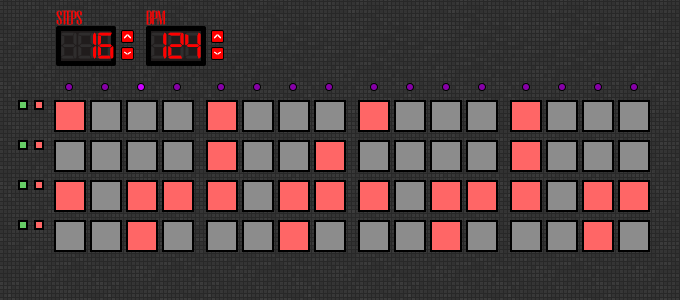
<style>
.page{position:relative;width:680px;height:300px;background:#282828}
.page>*{position:absolute;margin:0}
.t1{font:17px "Tommaso";letter-spacing:-0.04em;color:#ff0000}
.t2{font:39.3px "Digital-7";letter-spacing:-0.04em;color:#2f2d2d}
.t3{font:39.3px "Digital-7";letter-spacing:-0.04em;color:#ff0000}
.t4{font:18px "Digital-7";letter-spacing:-0.04em;color:#ffffff}
.t5{font:39.3px "Digital-7";letter-spacing:-0.04em}
.t6{font:13.2px "Digital-7";letter-spacing:-0.04em;color:#ffffff;scale:1.37 1}
</style>
<div class="page">
<p class="t1" style="left:56px;top:10px;width:26px;height:15px">STEPS</p>
<p class="t1" style="left:146px;top:10px;width:19px;height:15px">BPM</p>
<p class="t2" style="left:61px;top:32px;width:50px;height:27px">888</p>
<p class="t3" style="left:93px;top:32px;width:21px;height:27px">16</p>
<p class="t4" style="left:124px;top:34px;width:7px;height:5px">^</p>
<p class="t5" style="left:151px;top:32px;width:50px;height:27px">888</p>
<p class="t3" style="left:163px;top:32px;width:38px;height:27px">124</p>
<p class="t4" style="left:214px;top:34px;width:7px;height:5px">^</p>
<p class="t6" style="left:124px;top:51px;width:7px;height:4px">^</p>
<p class="t6" style="left:214px;top:51px;width:7px;height:4px">^</p>
</div>
